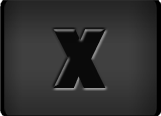
<style>
.page{position:relative;width:161px;height:116px}
.page>*{position:absolute;margin:0}
.t1{font:100px "GillSans-UltraBoldCondensed";color:#000000;scale:0.91 1}
</style>
<div class="page">
<p class="t1" style="left:53px;top:29px;width:53px;height:59px;opacity:0.85">x</p>
</div>
